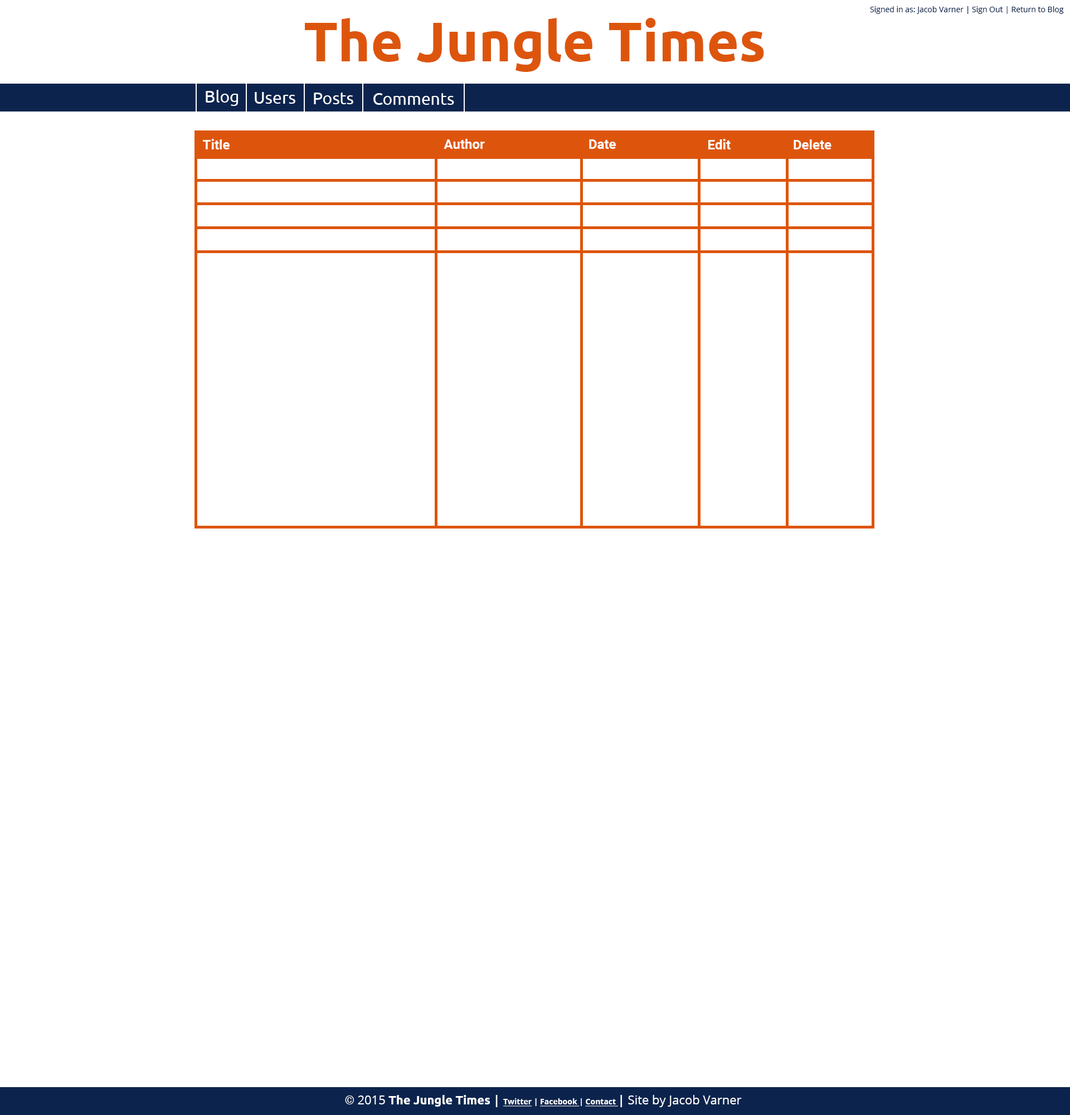
<style>
.page{position:relative;width:1070px;height:1115px;background:#ffffff}
.page>*{position:absolute;margin:0}
.t1{font:55.7px "Ubuntu-Bold";color:#dd550c}
.t2{font:7.8px "OpenSans";color:#0c244d}
.t3{font:16.7px "Ubuntu";color:#ffffff}
.t4{font:13.4px "Roboto-Bold";color:#ffffff}
.t5{font:12.3px "OpenSans";color:#ffffff}
.t6{font:12.3px "Roboto-Bold";color:#ffffff}
.t7{font:12.3px "Ubuntu-Bold";color:#ffffff}
.t8{font:12.3px "OpenSans-Bold";color:#ffffff}
.t9{font:7.8px "OpenSans-Bold";color:#ffffff;text-decoration:underline}
.t10{font:7.8px "OpenSans-Bold";color:#ffffff}
</style>
<div class="page">
<p class="t1" style="left:305px;top:18px;width:459px;height:54px">The Jungle Times</p>
<p class="t2" style="left:870px;top:6px;width:194px;height:8px">Signed in as: Jacob Varner | Sign Out | Return to Blog</p>
<p class="t3" style="left:206px;top:90px;width:32px;height:16px">Blog</p>
<p class="t3" style="left:255px;top:92px;width:40px;height:12px">Users</p>
<p class="t3" style="left:314px;top:93px;width:39px;height:11px">Posts</p>
<p class="t3" style="left:373px;top:93px;width:81px;height:12px">Comments</p>
<p class="t4" style="left:203px;top:139px;width:27px;height:10px">Title</p>
<p class="t4" style="left:444px;top:139px;width:41px;height:10px">Author</p>
<p class="t4" style="left:589px;top:139px;width:27px;height:10px">Date</p>
<p class="t4" style="left:708px;top:139px;width:23px;height:10px">Edit</p>
<p class="t4" style="left:794px;top:139px;width:37px;height:10px">Delete</p>
<p class="t5" style="left:345px;top:1094px;width:397px;height:13px"><span class="t6">© </span>2015 <span class="t7">The Jungle Times </span><span class="t8">| </span><span class="t9">Twitter</span><span class="t10"> | </span><span class="t9">Facebook </span><span class="t10">| </span><span class="t9">Contact </span><span class="t8">| </span>Site by Jacob Varner</p>
</div>
